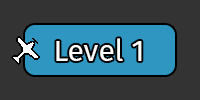
<style>
.page{position:relative;width:200px;height:100px;background:#333333}
.page>*{position:absolute;margin:0}
.t1{font:30px "FiraSans-Regular";color:#ffffff}
</style>
<div class="page">
<p class="t1" style="left:56px;top:38px;width:86px;height:23px">Level 1</p>
</div>
